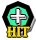
<style>
.page{position:relative;width:36px;height:40px;background:#ffffff}
.page>*{position:absolute;margin:0}
.t1{font:34.6px "Algerian";color:#ffffff}
.t2{font:14.8px "Algerian";color:#fee512}
</style>
<div class="page">
<p class="t1" style="left:10px;top:9px;width:17px;height:16px">+</p>
<p class="t2" style="left:7px;top:26px;width:23px;height:11px">HIT</p>
</div>
